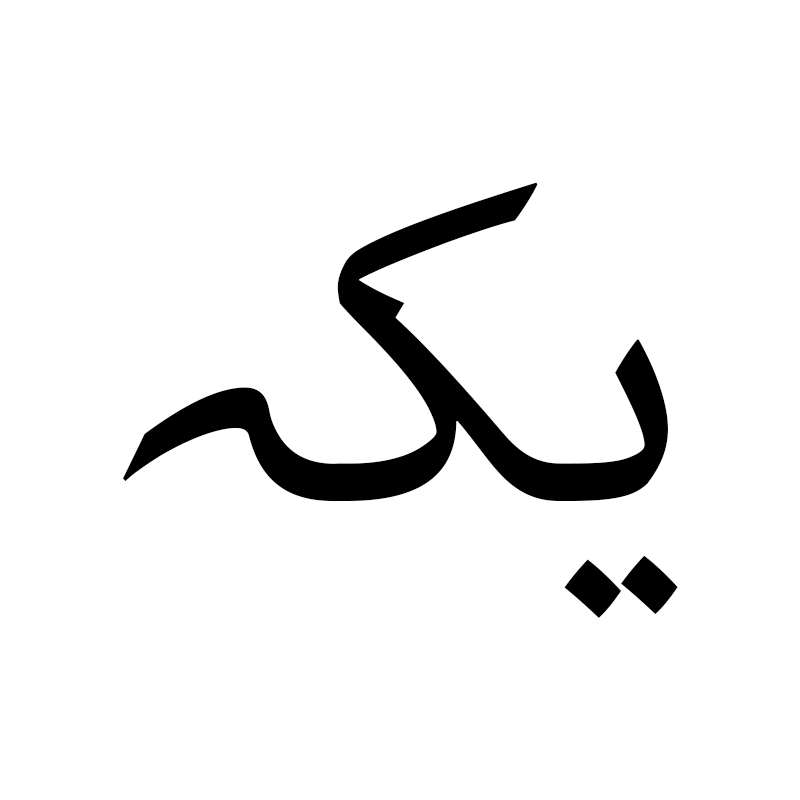
<style>
.page{position:relative;width:800px;height:800px;background:#ffffff}
.page>*{position:absolute;margin:0}
.t1{font:600px "AdobeArabic-Regular";color:#000000}
</style>
<div class="page">
<p class="t1" style="left:123px;top:182px;width:555px;height:436px">یکہ</p>
</div>
